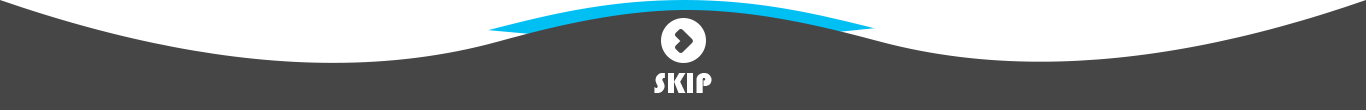
<style>
.page{position:relative;width:1366px;height:110px;background:#464646}
.page>*{position:absolute;margin:0}
.t1{font:30px "Bauhaus93";color:#ffffff}
</style>
<div class="page">
<p class="t1" style="left:654px;top:73px;width:58px;height:20px">SKIP</p>
</div>
